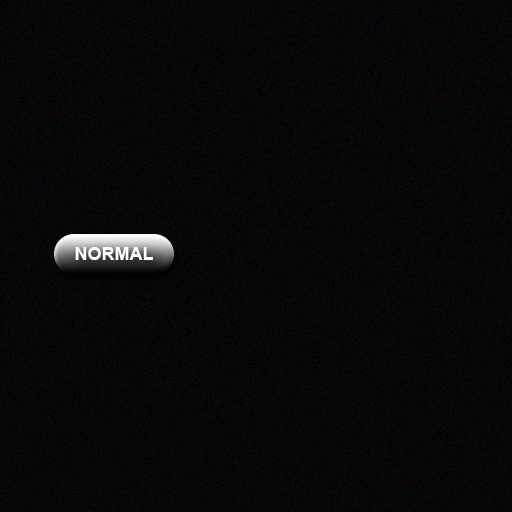
<style>
.page{position:relative;width:512px;height:512px}
.page>*{position:absolute;margin:0}
.t1{font:18px "Arial-BoldMT";color:#ffffff}
</style>
<div class="page">
<p class="t1" style="left:75px;top:247px;width:78px;height:13px">NORMAL</p>
</div>
